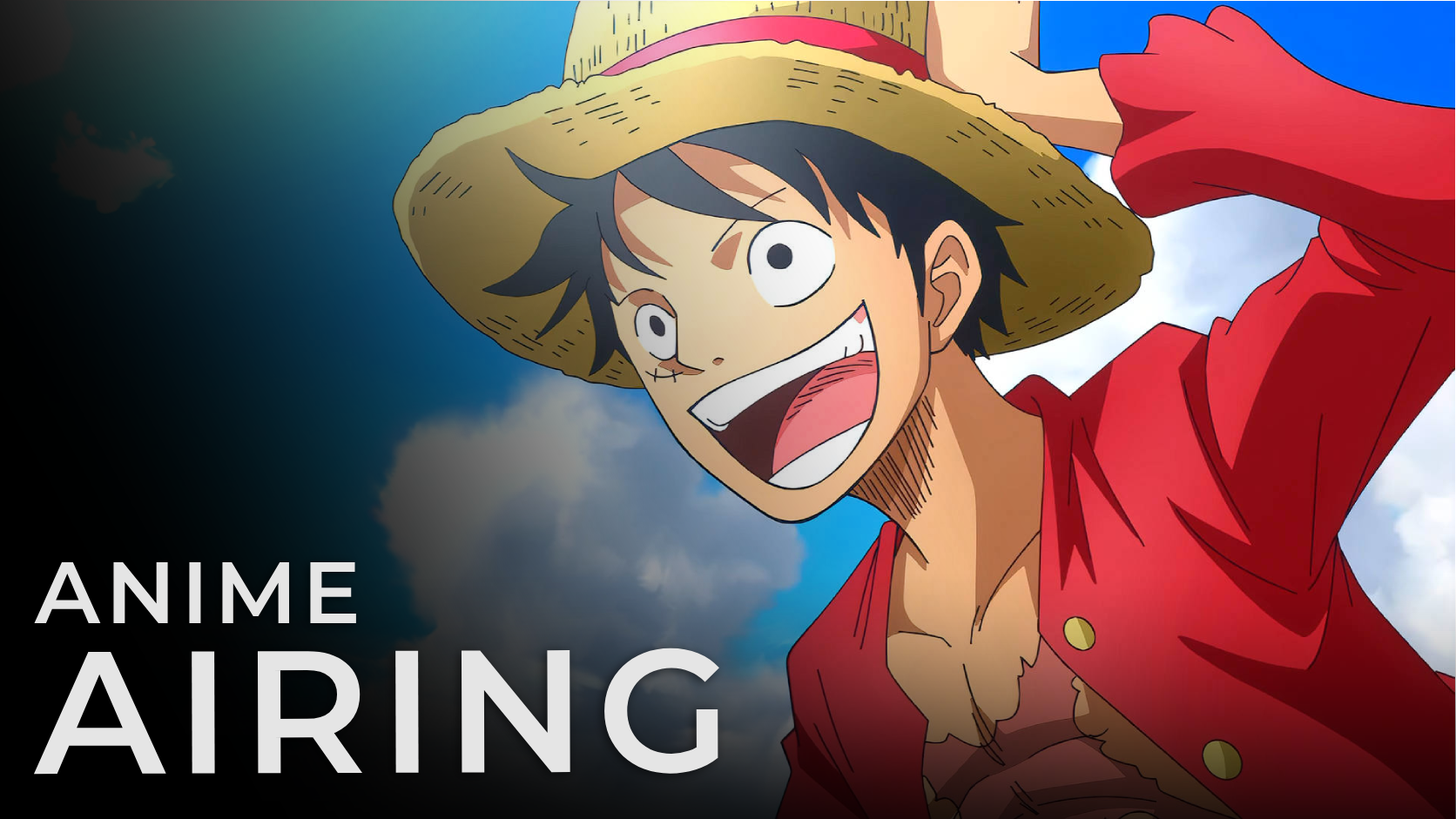
<style>
.page{position:relative;width:1456px;height:819px}
.page>*{position:absolute;margin:0}
.t1{font:87.1px "Montserrat-SemiBold";letter-spacing:0.06em;color:#e5e5e5}
.t2{font:174.1px "Montserrat-SemiBold";letter-spacing:0.06em;color:#e5e5e5}
</style>
<div class="page">
<p class="t1" style="left:34px;top:562px;width:322px;height:61px">ANIME</p>
<p class="t2" style="left:33px;top:648px;width:686px;height:127px">AIRING</p>
</div>
